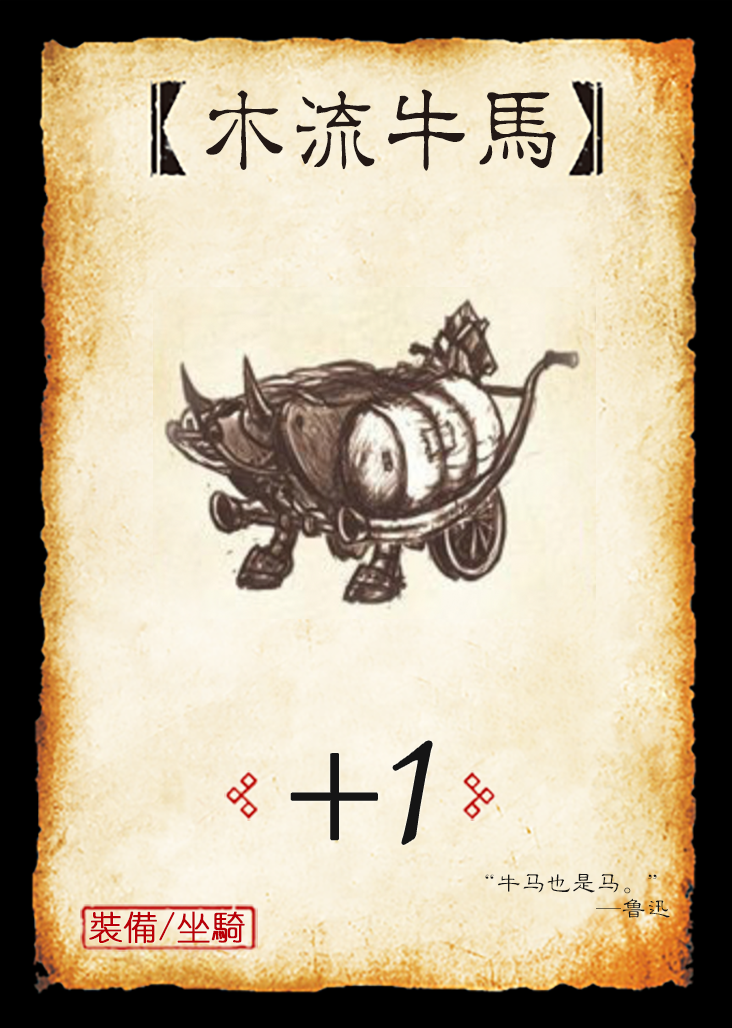
<style>
.page{position:relative;width:732px;height:1028px}
.page>*{position:absolute;margin:0}
.t1{font:95.8px "JMFLS_GBK";color:#221815;scale:0.95 1}
.t2{font:191.7px "Jxixinkai";color:#151515}
.t3{font:141.7px "Jxixinkai";color:#151515}
.t4{font:25px/25px "FZLBJW--GB1-0";color:#151515}
.t5{font:33.3px "YouYuan";color:#ba0007;font-weight:bold}
</style>
<div class="page">
<p class="t1" style="left:206px;top:89px;width:350px;height:82px">木流牛马</p>
<p class="t2" style="left:393px;top:741px;width:39px;height:103px">1</p>
<p class="t3" style="left:291px;top:754px;width:86px;height:86px">+</p>
<p class="t4" style="left:485px;top:873px;width:185px;height:45px;text-align:right">“牛马也是马。”<br>—鲁迅</p>
<p class="t5" style="left:89px;top:911px;width:156px;height:33px">裝備/坐騎</p>
</div>
